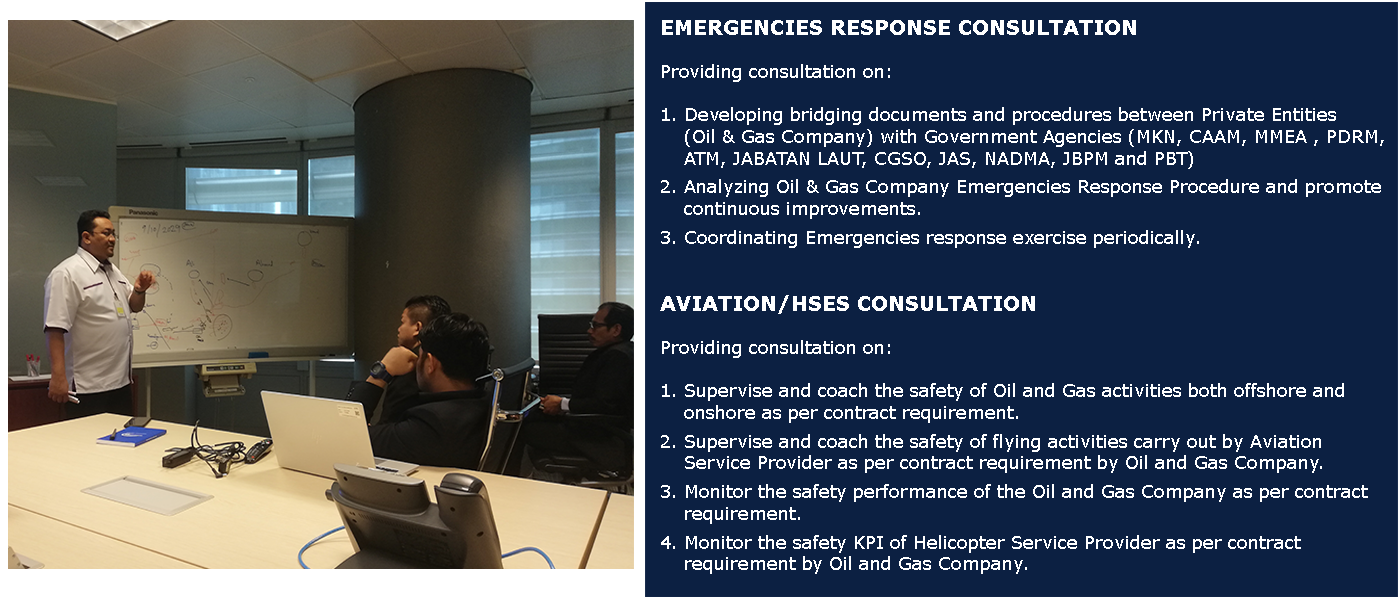
<style>
.page{position:relative;width:1400px;height:600px;background:#0c2042}
.page>*{position:absolute;margin:0}
.t1{font:18px "Verdana";color:#ffffff}
.t2{font:20px "Verdana-Bold";color:#ffffff}
</style>
<div class="page">
<p class="t1" style="left:660px;top:20px;width:724px;height:554px"><span class="t2">EMERGENCIES RESPONSE CONSULTATION<br></span><br>Providing consultation on:<br><br>1. Developing bridging documents and procedures between Private Entities <br>    (Oil &amp; Gas Company) with Government Agencies (MKN, CAAM, MMEA , PDRM, <br>    ATM, JABATAN LAUT, CGSO, JAS, NADMA, JBPM and PBT)<br><br>2. Analyzing Oil &amp; Gas Company Emergencies Response Procedure and promote <br>    continuous improvements.<br><br>3. Coordinating Emergencies response exercise periodically.<br><br><br><span class="t2">AVIATION/HSES CONSULTATION<br></span><br>Providing consultation on:<br><br>1. Supervise and coach the safety of Oil and Gas activities both offshore and <br>    onshore as per contract requirement.<br><br>2. Supervise and coach the safety of flying activities carry out by Aviation <br>    Service Provider as per contract requirement by Oil and Gas Company.<br>  <br>3. Monitor the safety performance of the Oil and Gas Company as per contract <br>    requirement.<br><br>4. Monitor the safety KPI of Helicopter Service Provider as per contract <br>    requirement by Oil and Gas Company.</p>
</div>
